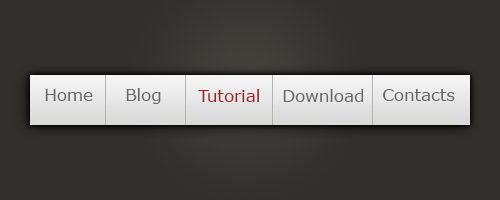
<style>
.page{position:relative;width:500px;height:200px;background:#31302c}
.page>*{position:absolute;margin:0}
.t1{font:16.7px "Verdana";color:#686868}
.t2{font:16.7px "Verdana";color:#a42323}
</style>
<div class="page">
<p class="t1" style="left:45px;top:89px;width:48px;height:12px">Home</p>
<p class="t1" style="left:126px;top:88px;width:35px;height:16px">Blog</p>
<p class="t2" style="left:198px;top:89px;width:61px;height:13px">Tutorial</p>
<p class="t1" style="left:283px;top:89px;width:81px;height:13px">Downloads</p>
<p class="t1" style="left:383px;top:89px;width:72px;height:12px">Contacts</p>
</div>
